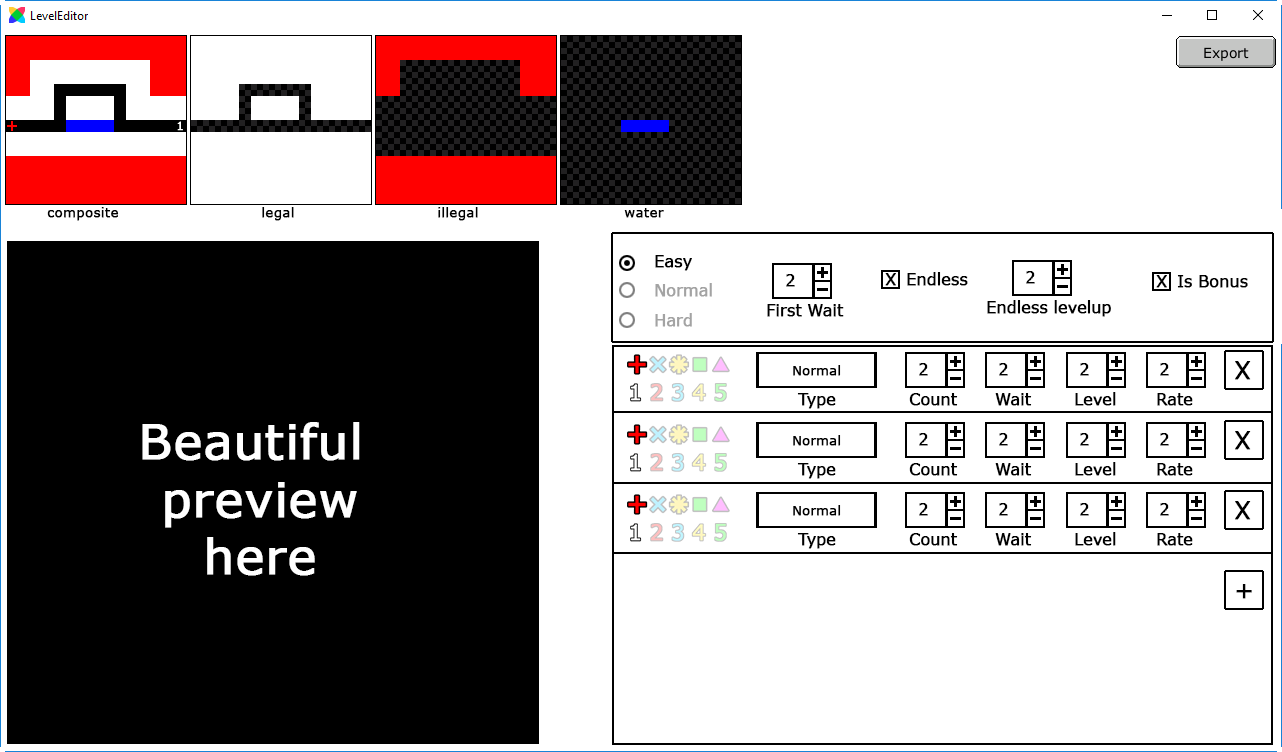
<style>
.page{position:relative;width:1282px;height:752px;background:#ffffff}
.page>*{position:absolute;margin:0}
.t1{font:13.3px "Verdana";color:#000000;font-weight:bold}
.t2{font:12px "Verdana";letter-spacing:-0.02em;color:#000000;font-weight:bold}
.t3{font:12px/29.3px "Verdana";letter-spacing:-0.02em;color:#a3a3a3;font-weight:bold}
.t4{font:13.3px "Verdana";letter-spacing:-0.02em;color:#000000;font-weight:bold}
.t5{font:24px "Verdana";letter-spacing:-0.02em;color:#000000;font-weight:bold}
.t6{font:48px "Verdana";color:#ffffff;font-weight:bold}
</style>
<div class="page">
<p class="t1" style="left:47px;top:207px;width:72px;height:14px">composite</p>
<p class="t1" style="left:262px;top:207px;width:32px;height:14px">legal</p>
<p class="t1" style="left:438px;top:207px;width:40px;height:14px">illegal</p>
<p class="t1" style="left:624px;top:208px;width:40px;height:10px">water</p>
<p class="t2" style="left:655px;top:255px;width:37px;height:16px">Easy</p>
<p class="t2" style="left:786px;top:274px;width:9px;height:13px">2</p>
<p class="t2" style="left:885px;top:273px;width:11px;height:13px">X</p>
<p class="t2" style="left:907px;top:272px;width:61px;height:14px">Endless</p>
<p class="t2" style="left:1026px;top:271px;width:9px;height:13px">2</p>
<p class="t2" style="left:1156px;top:275px;width:11px;height:13px">X</p>
<p class="t2" style="left:1177px;top:275px;width:71px;height:13px">Is Bonus</p>
<p class="t3" style="left:655px;top:283px;width:57px;height:44px">Normal<br>Hard</p>
<p class="t2" style="left:767px;top:304px;width:77px;height:13px">First Wait</p>
<p class="t2" style="left:987px;top:300px;width:124px;height:17px">Endless levelup</p>
<p class="t4" style="left:793px;top:365px;width:48px;height:11px">Normal</p>
<p class="t2" style="left:919px;top:363px;width:9px;height:13px">2</p>
<p class="t2" style="left:999px;top:363px;width:9px;height:13px">2</p>
<p class="t2" style="left:1080px;top:363px;width:9px;height:13px">2</p>
<p class="t2" style="left:1160px;top:363px;width:9px;height:13px">2</p>
<p class="t5" style="left:1235px;top:361px;width:16px;height:19px">X</p>
<p class="t2" style="left:797px;top:393px;width:39px;height:16px">Type</p>
<p class="t2" style="left:909px;top:393px;width:49px;height:13px">Count</p>
<p class="t2" style="left:995px;top:393px;width:37px;height:13px">Wait</p>
<p class="t2" style="left:1075px;top:392px;width:41px;height:14px">Level</p>
<p class="t2" style="left:1157px;top:393px;width:36px;height:13px">Rate</p>
<p class="t6" style="left:142px;top:422px;width:218px;height:154px;text-align:center">Beautiful <br>preview<br>here</p>
<p class="t4" style="left:793px;top:435px;width:48px;height:11px">Normal</p>
<p class="t2" style="left:919px;top:433px;width:9px;height:13px">2</p>
<p class="t2" style="left:999px;top:433px;width:9px;height:13px">2</p>
<p class="t2" style="left:1080px;top:433px;width:9px;height:13px">2</p>
<p class="t2" style="left:1160px;top:433px;width:9px;height:13px">2</p>
<p class="t5" style="left:1235px;top:431px;width:16px;height:19px">X</p>
<p class="t2" style="left:1075px;top:462px;width:41px;height:14px">Level</p>
<p class="t2" style="left:797px;top:463px;width:39px;height:16px">Type</p>
<p class="t2" style="left:909px;top:463px;width:49px;height:13px">Count</p>
<p class="t2" style="left:995px;top:463px;width:37px;height:13px">Wait</p>
<p class="t2" style="left:1157px;top:463px;width:36px;height:13px">Rate</p>
<p class="t4" style="left:793px;top:505px;width:48px;height:11px">Normal</p>
<p class="t2" style="left:919px;top:503px;width:9px;height:13px">2</p>
<p class="t2" style="left:999px;top:503px;width:9px;height:13px">2</p>
<p class="t2" style="left:1080px;top:503px;width:9px;height:13px">2</p>
<p class="t2" style="left:1160px;top:503px;width:9px;height:13px">2</p>
<p class="t5" style="left:1235px;top:501px;width:16px;height:19px">X</p>
<p class="t2" style="left:797px;top:533px;width:39px;height:16px">Type</p>
<p class="t2" style="left:909px;top:533px;width:49px;height:13px">Count</p>
<p class="t2" style="left:995px;top:533px;width:37px;height:13px">Wait</p>
<p class="t2" style="left:1075px;top:532px;width:41px;height:14px">Level</p>
<p class="t2" style="left:1157px;top:533px;width:36px;height:13px">Rate</p>
<p class="t5" style="left:1236px;top:584px;width:16px;height:15px">+</p>
</div>
